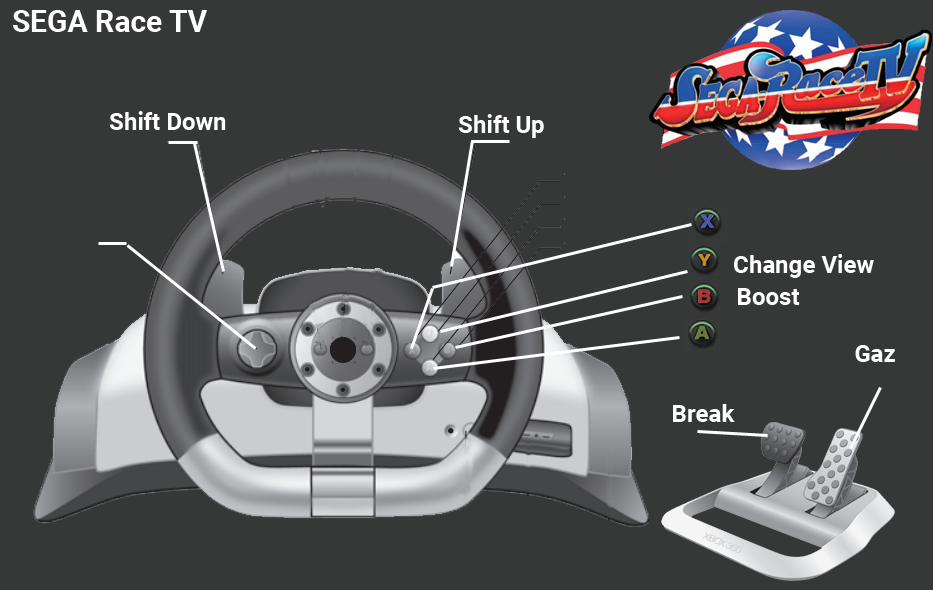
<style>
.page{position:relative;width:933px;height:590px;background:#363838}
.page>*{position:absolute;margin:0}
.t1{font:30px "Roboto-Bold";color:#ffffff}
.t2{font:24px "Roboto-Bold";color:#ffffff}
</style>
<div class="page">
<p class="t1" style="left:13px;top:10px;width:194px;height:22px">SEGA Race TV</p>
<p class="t2" style="left:109px;top:111px;width:117px;height:19px">Shift Down</p>
<p class="t2" style="left:458px;top:114px;width:86px;height:24px">Shift Up</p>
<p class="t2" style="left:734px;top:254px;width:140px;height:24px">Change View</p>
<p class="t2" style="left:738px;top:288px;width:62px;height:17px">Boost</p>
<p class="t2" style="left:855px;top:345px;width:40px;height:17px">Gaz</p>
<p class="t2" style="left:673px;top:404px;width:62px;height:18px">Break</p>
</div>
